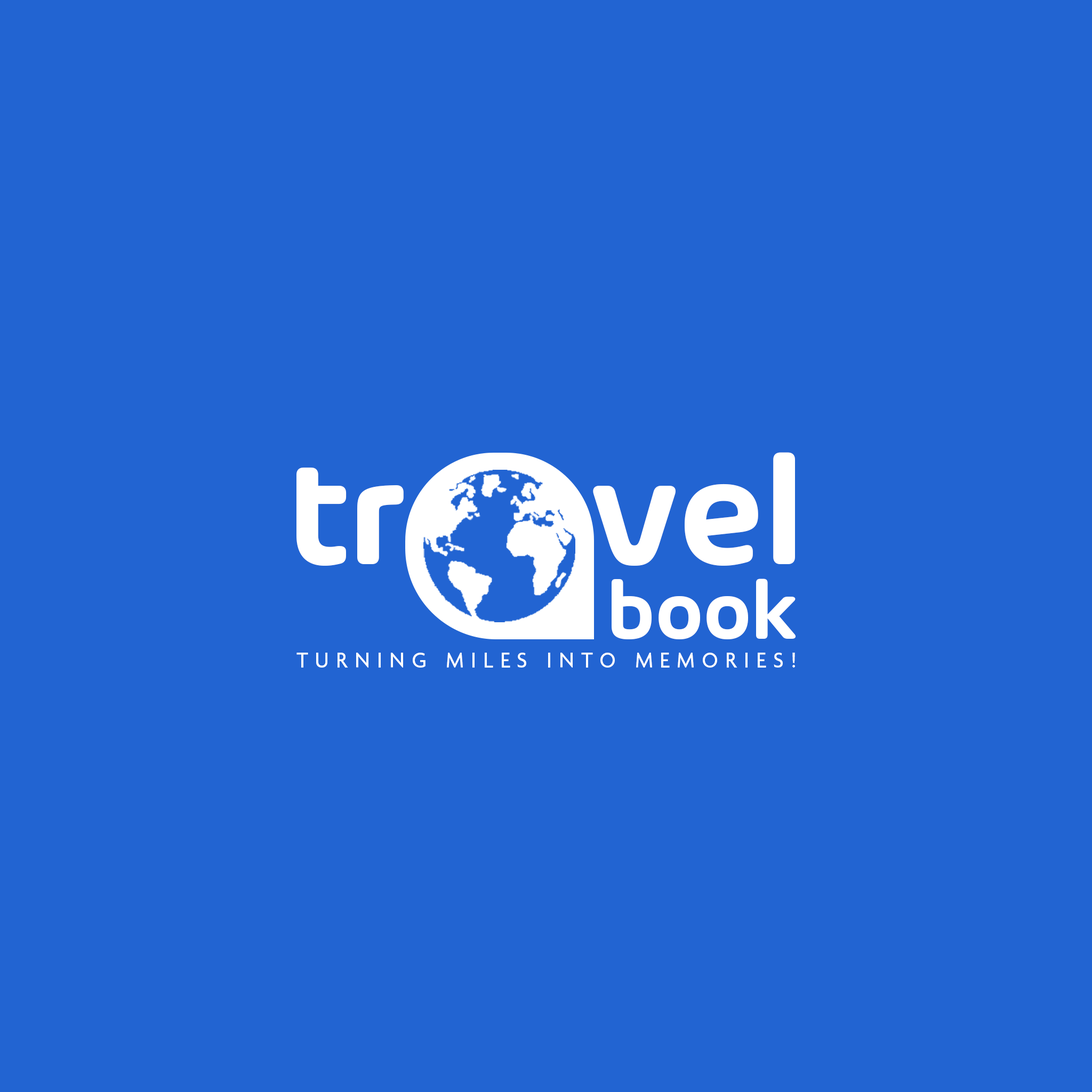
<style>
.page{position:relative;width:1092px;height:1092px;background:#2264d2}
.page>*{position:absolute;margin:0}
.t1{font:159.4px "ArlonSemiBold-DEMO";color:#ffffff;scale:0.96 1}
.t2{font:85.3px "ArlonSemiBold-DEMO";color:#ffffff;scale:0.96 1}
.t3{font:22.8px "Agenda-Medium";letter-spacing:0.32em;color:#ffffff;text-transform:uppercase;scale:0.96 1}
</style>
<div class="page">
<p class="t1" style="left:296px;top:452px;width:499px;height:114px">tr     vel</p>
<p class="t2" style="left:612px;top:579px;width:184px;height:60px">book</p>
<p class="t3" style="left:296px;top:653px;width:499px;height:15px">Turning Miles into Memories!</p>
</div>
